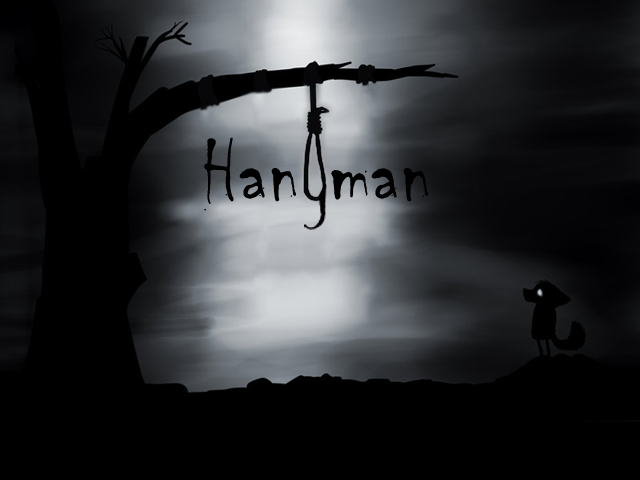
<style>
.page{position:relative;width:640px;height:480px;background:#000000}
.page>*{position:absolute;margin:0}
.t1{font:90.3px "Chiller-Regular";letter-spacing:0.02em;color:#000000}
</style>
<div class="page">
<p class="t1" style="left:204px;top:137px;width:225px;height:74px">Han man</p>
</div>
